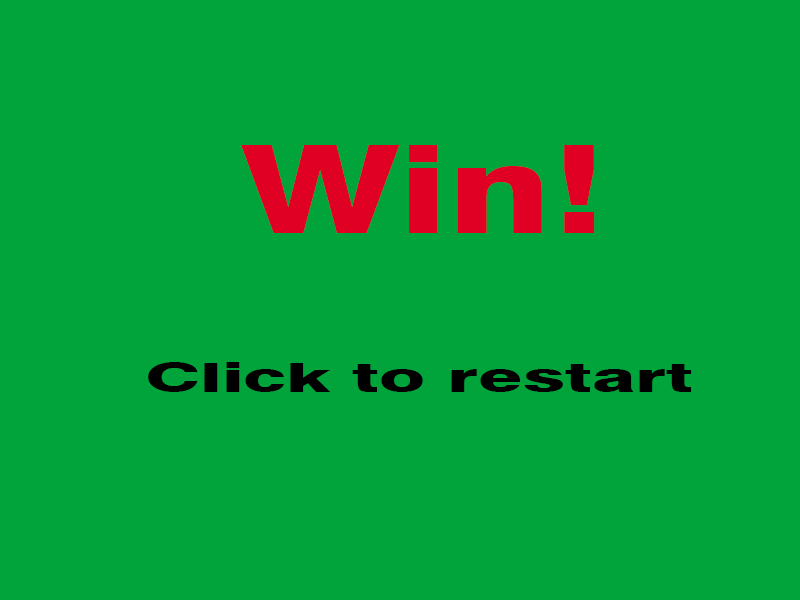
<style>
.page{position:relative;width:800px;height:600px;background:#00a43b}
.page>*{position:absolute;margin:0}
.t1{font:122.1px "Swiss721BT-Heavy";color:#df0024;scale:1.35 1}
.t2{font:40.9px "Swiss721BT-Heavy";color:#000000;scale:1.8 1}
</style>
<div class="page">
<p class="t1" style="left:241px;top:145px;width:354px;height:88px">Win!</p>
<p class="t2" style="left:148px;top:362px;width:544px;height:30px">Click to restart</p>
</div>
